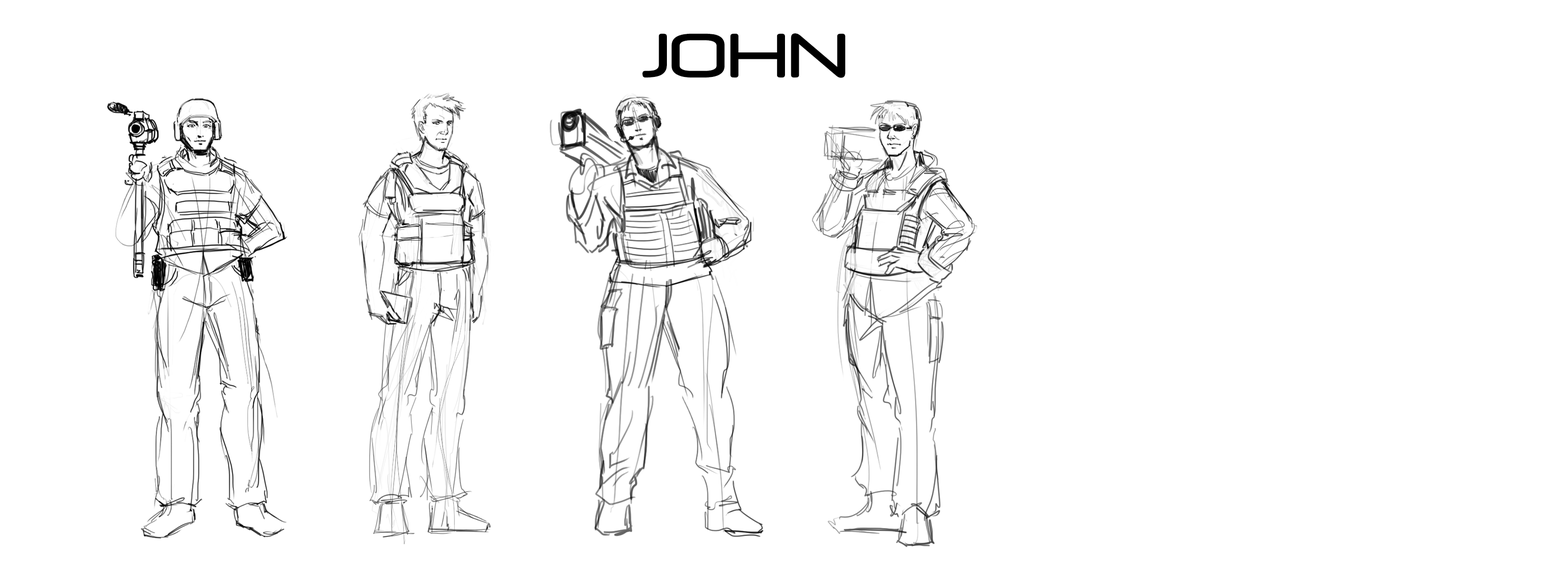
<style>
.page{position:relative;width:1568px;height:588px;background:#ffffff}
.page>*{position:absolute;margin:0}
.t1{font:73.5px "Neuropol";letter-spacing:0.005em;color:#000000}
</style>
<div class="page">
<p class="t1" style="left:642px;top:33px;width:203px;height:45px">JOHN</p>
</div>
